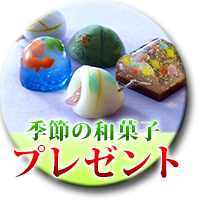
<style>
.page{position:relative;width:200px;height:200px}
.page>*{position:absolute;margin:0}
.t1{font:22px "KozMinPro-Heavy";letter-spacing:0.05em}
.t2{font:36px "KozMinPro-Heavy";letter-spacing:0.05em}
</style>
<div class="page">
<p class="t1" style="left:26px;top:120px;width:134px;height:22px">季節の和菓子</p>
<p class="t2" style="left:14px;top:144px;width:165px;height:34px">プレゼント</p>
</div>
